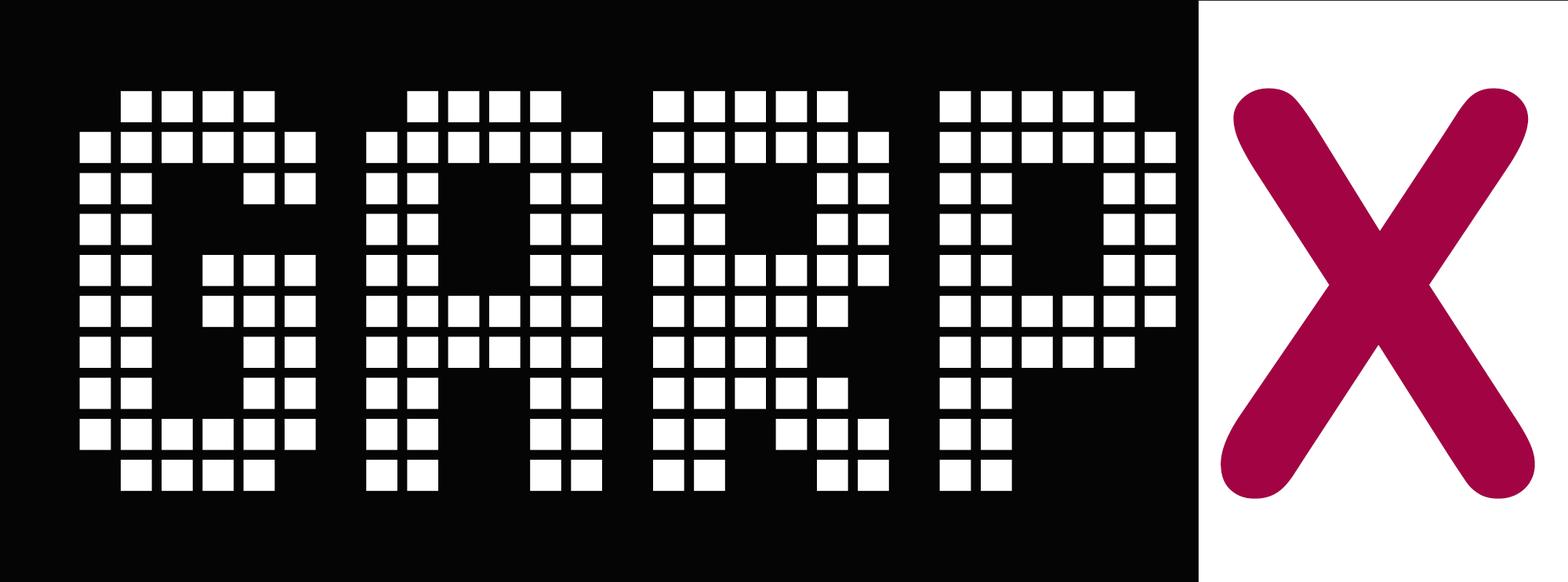
<style>
.page{position:relative;width:1568px;height:582px;background:#050505}
.page>*{position:absolute;margin:0}
.t1{font:553.9px "ArialRoundedMTBold";color:#a20343}
.t2{font:512px "AdvancedLEDBoard-7";color:#ffffff}
</style>
<div class="page">
<p class="t1" style="left:1221px;top:88px;width:314px;height:411px">X</p>
<p class="t2" style="left:79px;top:91px;width:1097px;height:400px">GARP</p>
</div>
